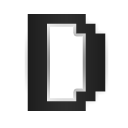
<style>
.page{position:relative;width:128px;height:128px;background:#ffffff}
.page>*{position:absolute;margin:0}
.t1{font:124px "System";color:#242424}
</style>
<div class="page">
<p class="t1" style="left:27px;top:14px;width:79px;height:97px">D</p>
</div>
